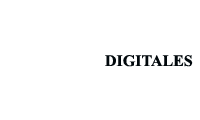
<style>
.page{position:relative;width:200px;height:120px;background:#ffffff}
.page>*{position:absolute;margin:0}
.t1{font:16px "TimesNewRomanPS-BoldMT";color:#01080c}
</style>
<div class="page">
<p class="t1" style="left:105px;top:55px;width:88px;height:12px">DIGITALES</p>
</div>
